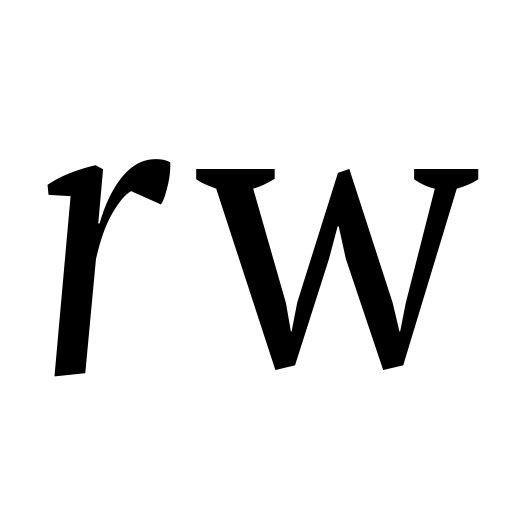
<style>
.page{position:relative;width:512px;height:512px;background:#ffffff}
.page>*{position:absolute;margin:0}
.t1{font:401.7px "PTSerif-Italic";letter-spacing:-0.03em;color:#000000;scale:0.89 1}
.t2{font:391.7px "PTSerif-Regular";letter-spacing:-0.03em;color:#000000;scale:0.96 1}
</style>
<div class="page">
<p class="t1" style="left:47px;top:159px;width:124px;height:218px;rotate:-6deg">r</p>
<p class="t2" style="left:196px;top:169px;width:283px;height:201px">w</p>
</div>
